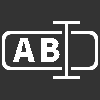
<style>
.page{position:relative;width:100px;height:100px;background:#333333}
.page>*{position:absolute;margin:0}
.t1{font:37.5px "SourceSansRoman-Black";letter-spacing:0.1em;color:#ffffff;text-transform:uppercase}
</style>
<div class="page">
<p class="t1" style="left:13px;top:38px;width:47px;height:24px">AB</p>
</div>
